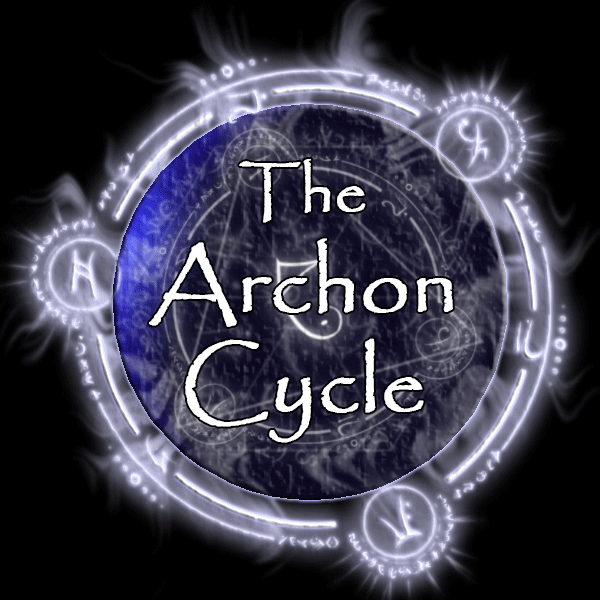
<style>
.page{position:relative;width:600px;height:600px;background:#000000}
.page>*{position:absolute;margin:0}
.t1{font:87.5px/100px "Papyrus-Regular";color:#ffffff;font-weight:bold}
.t2{font:62.5px/100px "Papyrus-Regular";color:#ffffff;font-weight:bold}
</style>
<div class="page">
<p class="t1" style="left:149px;top:159px;width:304px;height:284px;text-align:center"><span class="t2">The<br></span>Archon<br>Cycle</p>
</div>
